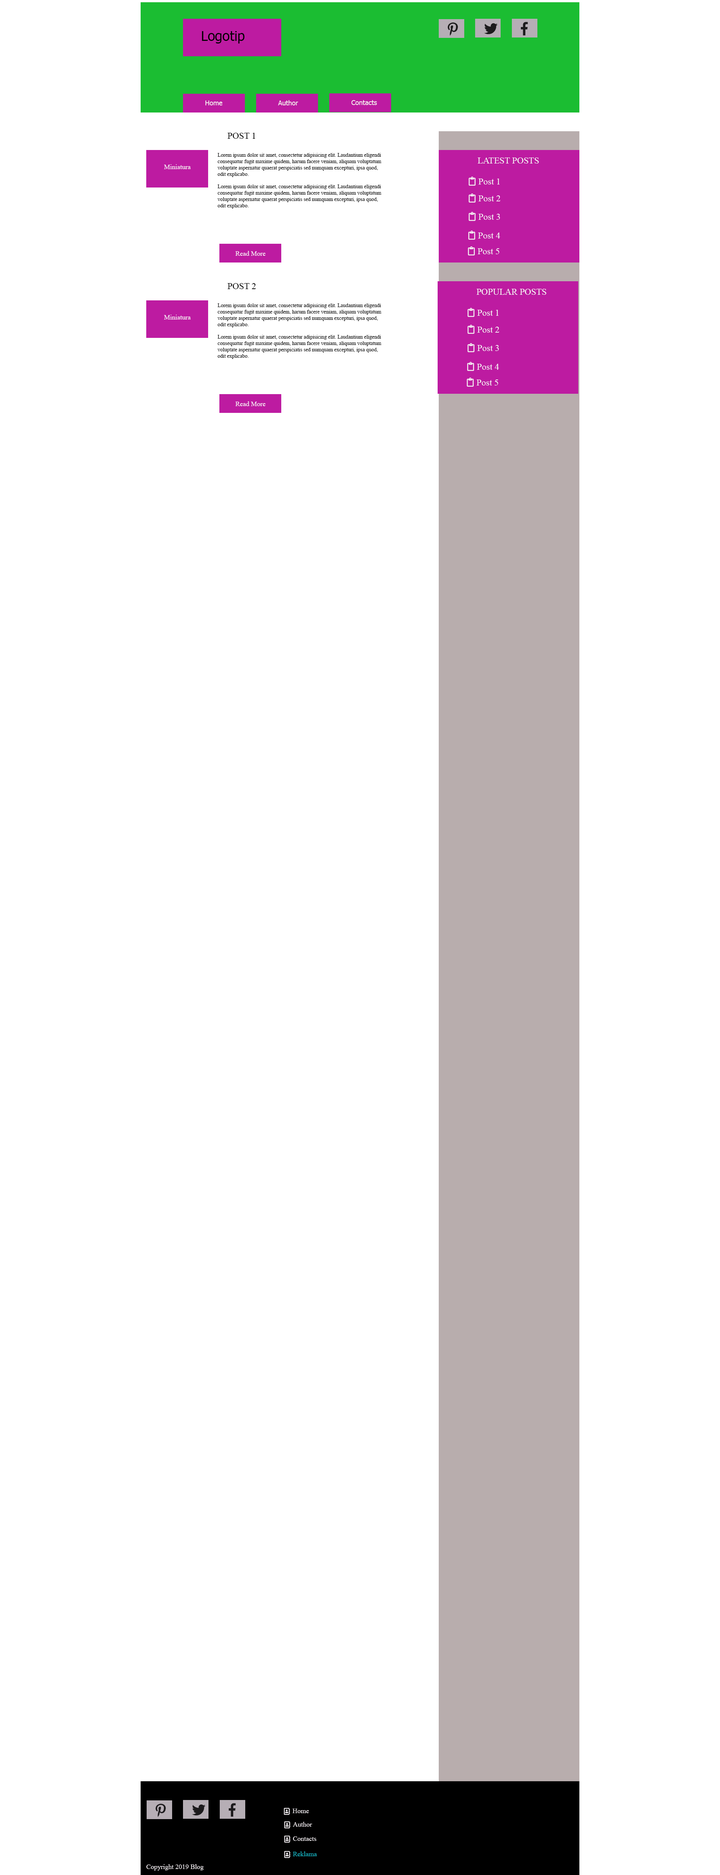
<style>
.page{position:relative;width:720px;height:1875px;background:#ffffff}
.page>*{position:absolute;margin:0}
.t1{font:13.5px "Tahoma";color:#000000}
.t2{font:6.8px "Tahoma";color:#f7f2f2}
.t3{font:9px "TimesNewRomanPSMT";color:#040404}
.t4{font:5.2px "TimesNewRomanPSMT";color:#080808}
.t5{font:9px "TimesNewRomanPSMT";color:#f6f2f5}
.t6{font:6.8px "TimesNewRomanPSMT";color:#fdfdfd}
.t7{font:6.8px "TimesNewRomanPSMT";color:#fdfafc}
.t8{font:6.8px "TimesNewRomanPSMT";color:#faf5f9}
.t9{font:6.8px "TimesNewRomanPSMT";color:#19b7c6}
</style>
<div class="page">
<p class="t1" style="left:202px;top:31px;width:42px;height:13px">Logotip</p>
<p class="t2" style="left:205px;top:100px;width:17px;height:5px">Home</p>
<p class="t2" style="left:278px;top:100px;width:20px;height:5px">Author</p>
<p class="t2" style="left:351px;top:100px;width:26px;height:5px">Contacts</p>
<p class="t3" style="left:228px;top:133px;width:27px;height:6px">POST 1</p>
<p class="t4" style="left:218px;top:153px;width:163px;height:55px">Lorem ipsum dolor sit amet, consectetur adipisicing elit. Laudantium eligendi <br>consequatur fugit maxime quidem, harum facere veniam, aliquam voluptatum <br>voluptate aspernatur quaerat perspiciatis sed numquam excepturi, ipsa quod, <br>odit explicabo.<br><br>Lorem ipsum dolor sit amet, consectetur adipisicing elit. Laudantium eligendi <br>consequatur fugit maxime quidem, harum facere veniam, aliquam voluptatum <br>voluptate aspernatur quaerat perspiciatis sed numquam excepturi, ipsa quod, <br>odit explicabo.</p>
<p class="t5" style="left:477px;top:158px;width:62px;height:6px">LATEST POSTS</p>
<p class="t6" style="left:164px;top:164px;width:27px;height:5px">Miniatura</p>
<p class="t5" style="left:478px;top:178px;width:22px;height:6px">Post 1</p>
<p class="t5" style="left:478px;top:195px;width:22px;height:6px">Post 2</p>
<p class="t5" style="left:478px;top:214px;width:22px;height:6px">Post 3</p>
<p class="t5" style="left:478px;top:232px;width:22px;height:6px">Post 4</p>
<p class="t7" style="left:236px;top:251px;width:30px;height:5px">Read More</p>
<p class="t5" style="left:478px;top:248px;width:22px;height:6px">Post 5</p>
<p class="t3" style="left:228px;top:283px;width:28px;height:6px">POST 2</p>
<p class="t5" style="left:477px;top:289px;width:69px;height:6px">POPULAR POSTS</p>
<p class="t4" style="left:218px;top:303px;width:163px;height:56px">Lorem ipsum dolor sit amet, consectetur adipisicing elit. Laudantium eligendi <br>consequatur fugit maxime quidem, harum facere veniam, aliquam voluptatum <br>voluptate aspernatur quaerat perspiciatis sed numquam excepturi, ipsa quod, <br>odit explicabo.<br><br>Lorem ipsum dolor sit amet, consectetur adipisicing elit. Laudantium eligendi <br>consequatur fugit maxime quidem, harum facere veniam, aliquam voluptatum <br>voluptate aspernatur quaerat perspiciatis sed numquam excepturi, ipsa quod, <br>odit explicabo.</p>
<p class="t6" style="left:164px;top:315px;width:27px;height:5px">Miniatura</p>
<p class="t5" style="left:477px;top:310px;width:22px;height:6px">Post 1</p>
<p class="t5" style="left:477px;top:327px;width:22px;height:6px">Post 2</p>
<p class="t5" style="left:477px;top:345px;width:22px;height:6px">Post 3</p>
<p class="t5" style="left:477px;top:364px;width:22px;height:6px">Post 4</p>
<p class="t5" style="left:477px;top:380px;width:21px;height:6px">Post 5</p>
<p class="t7" style="left:236px;top:401px;width:30px;height:5px">Read More</p>
<p class="t8" style="left:292px;top:1809px;width:17px;height:4px">Home</p>
<p class="t8" style="left:293px;top:1822px;width:19px;height:5px">Author</p>
<p class="t8" style="left:293px;top:1836px;width:23px;height:5px">Contacts</p>
<p class="t9" style="left:293px;top:1851px;width:24px;height:5px">Reklama</p>
<p class="t8" style="left:146px;top:1864px;width:58px;height:6px">Copyright 2019 Blog</p>
</div>
